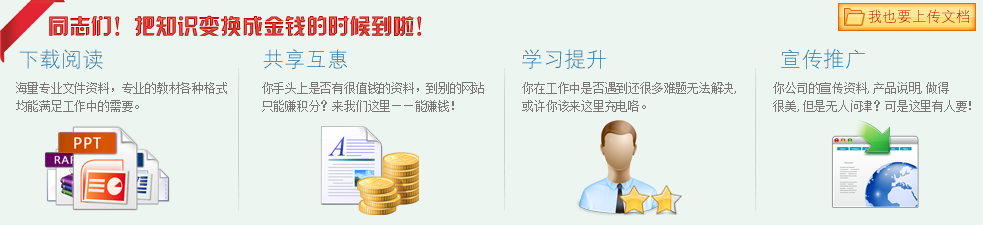
<style>
.page{position:relative;width:983px;height:225px;background:#ecf5f0}
.page>*{position:absolute;margin:0}
.t1{font:21.5px "HYk2gj"}
.t2{font:14.7px "HYg1gj"}
.t3{font:21.5px "HYg1gj";color:#2a749f}
.t4{font:11.7px/17.6px "SimSun";color:#787776}
</style>
<div class="page">
<p class="t1" style="left:49px;top:15px;width:373px;height:22px">同志们！把知识变换成金钱的时候到啦！</p>
<p class="t2" style="left:868px;top:9px;width:101px;height:15px">我也要上传文档</p>
<p class="t3" style="left:19px;top:49px;width:846px;height:20px">下载阅读               共享互惠                学习提升                宣传推广</p>
<p class="t4" style="left:16px;top:82px;width:211px;height:30px">海量专业文件资料，专业的教材各种格式<br>均能满足工作中的需要。</p>
<p class="t4" style="left:262px;top:82px;width:222px;height:30px">你手头上是否有很值钱的资料，到别的网站<br>只能赚积分？来我们这里——能赚钱！</p>
<p class="t4" style="left:522px;top:82px;width:214px;height:30px">你在工作中是否遇到还很多难题无法解决,<br>或许你该来这里充电咯。</p>
<p class="t4" style="left:773px;top:82px;width:198px;height:30px">你公司的宣传资料,产品说明,做得<br>很美,但是无人问津？可是这里有人要！</p>
</div>
